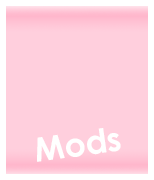
<style>
.page{position:relative;width:154px;height:180px;background:#ffcfdd}
.page>*{position:absolute;margin:0}
.t1{font:33.3px "CenturyGothic-Bold";color:#ffffff}
</style>
<div class="page">
<p class="t1" style="left:37px;top:128px;width:84px;height:34px;rotate:-8deg">Mods</p>
</div>
